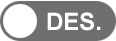
<style>
.page{position:relative;width:116px;height:41px;background:#6f6f6f}
.page>*{position:absolute;margin:0}
.t1{font:24px "Arial-BoldMT";color:#ffffff}
</style>
<div class="page">
<p class="t1" style="left:47px;top:12px;width:54px;height:19px">DES.</p>
</div>
